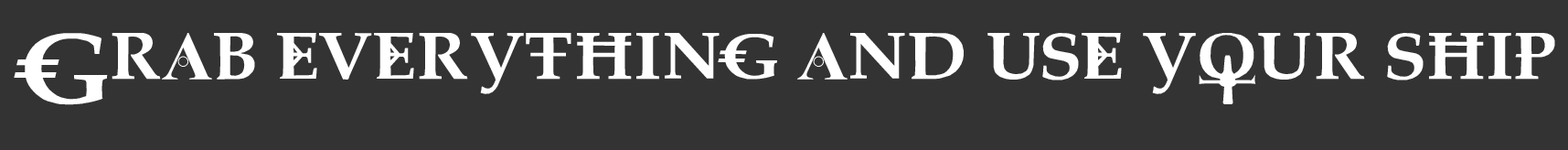
<style>
.page{position:relative;width:1568px;height:150px;background:#333333}
.page>*{position:absolute;margin:0}
.t1{font:68.6px "Dreaming-of-Lilian";color:#ffffff}
</style>
<div class="page">
<p class="t1" style="left:14px;top:33px;width:1541px;height:72px">Grab everything and use your ship</p>
</div>
